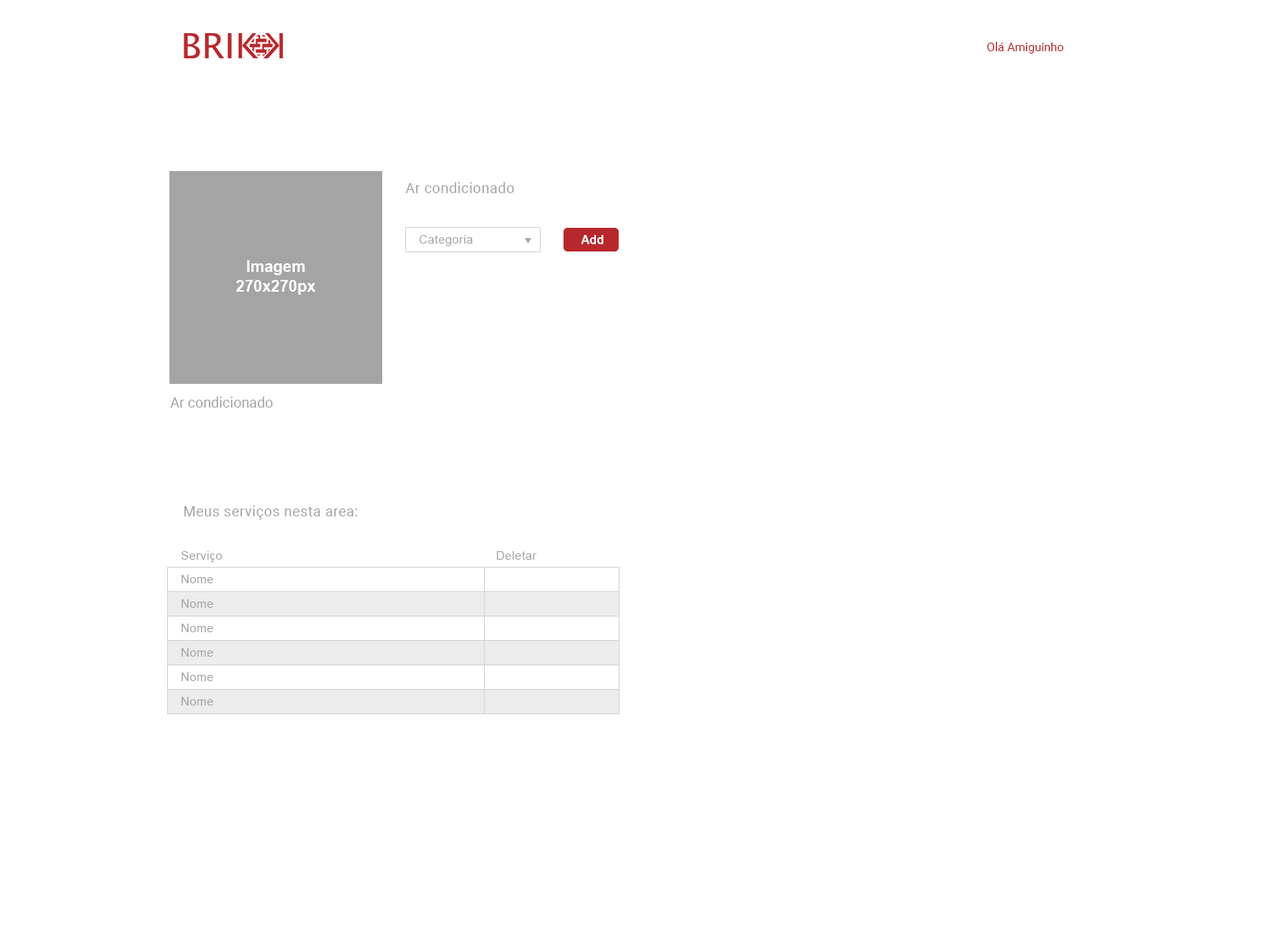
<style>
.page{position:relative;width:1261px;height:946px;background:#ffffff}
.page>*{position:absolute;margin:0}
.t1{font:11.8px "Roboto-Regular";color:#b8272c}
.t2{font:14.2px "Roboto-Regular";letter-spacing:0.03em;color:#a4a4a4}
.t3{font:11.8px "ArialMT";letter-spacing:0.03em;color:#a4a4a4}
.t4{font:11.8px "ArialMT";letter-spacing:0.03em;color:#ffffff;font-weight:bold}
.t5{font:15.8px/19.7px "Arial-BoldMT";color:#ffffff}
.t6{font:14.2px "Roboto-Regular";color:#a4a4a4}
</style>
<div class="page">
<p class="t1" style="left:987px;top:42px;width:77px;height:12px">Olá Amiguinho</p>
<p class="t2" style="left:405px;top:182px;width:109px;height:11px">Ar condicionado</p>
<p class="t3" style="left:419px;top:235px;width:54px;height:11px">Categoria</p>
<p class="t4" style="left:581px;top:235px;width:23px;height:9px">Add</p>
<p class="t5" style="left:236px;top:260px;width:80px;height:35px;text-align:center">Imagem<br>270x270px</p>
<p class="t6" style="left:170px;top:396px;width:103px;height:11px">Ar condicionado</p>
<p class="t2" style="left:184px;top:505px;width:173px;height:14px">Meus serviços nesta area:</p>
<p class="t3" style="left:181px;top:551px;width:41px;height:11px">Serviço</p>
<p class="t3" style="left:496px;top:551px;width:41px;height:9px">Deletar</p>
<p class="t3" style="left:181px;top:575px;width:33px;height:8px">Nome</p>
<p class="t3" style="left:181px;top:599px;width:33px;height:9px">Nome</p>
<p class="t3" style="left:181px;top:623px;width:33px;height:9px">Nome</p>
<p class="t3" style="left:181px;top:648px;width:33px;height:8px">Nome</p>
<p class="t3" style="left:181px;top:672px;width:33px;height:9px">Nome</p>
<p class="t3" style="left:181px;top:697px;width:33px;height:8px">Nome</p>
</div>
